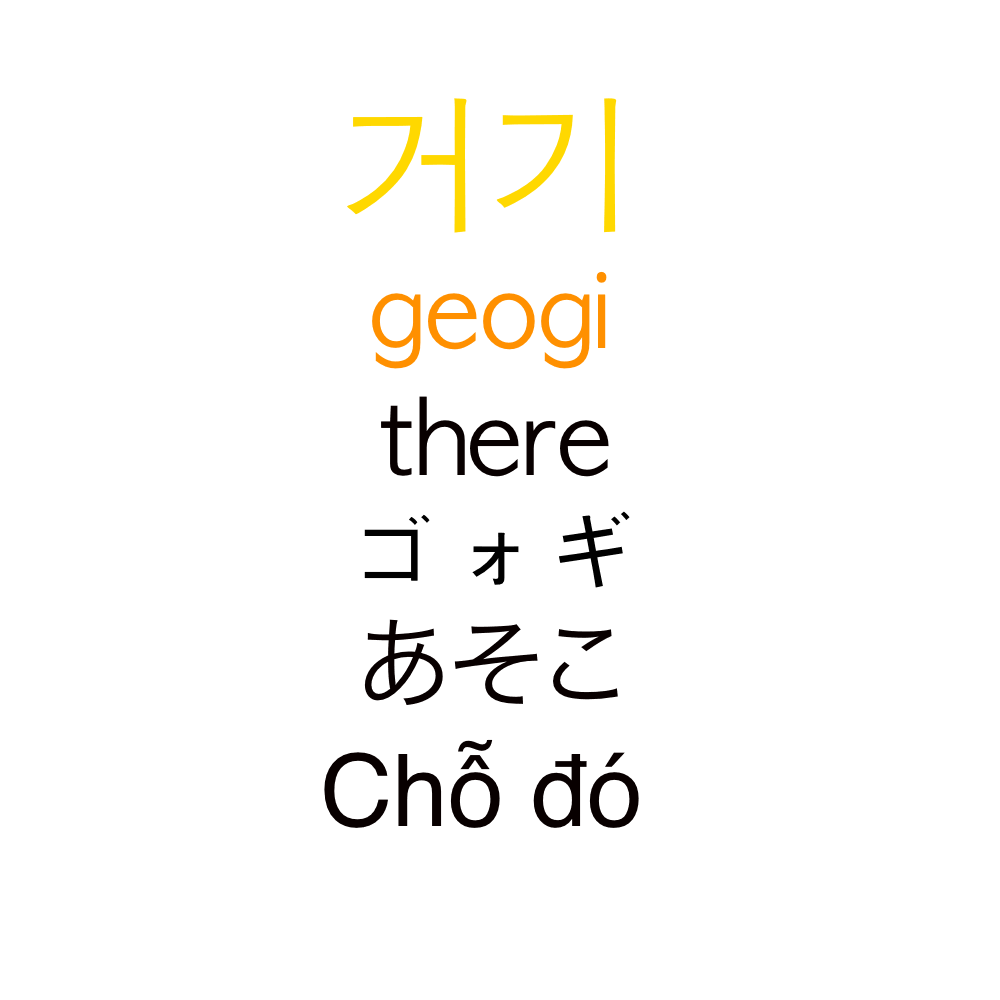
<style>
.page{position:relative;width:1000px;height:1000px;background:#ffffff}
.page>*{position:absolute;margin:0}
.t1{font:150px "AppleGothic";color:#ffd800}
.t2{font:100px "AppleGothic";color:#ff9000}
.t3{font:100px "AppleGothic";color:#080000}
.t4{font:100px "AppleGothic";color:#000000}
.t5{font:100px "HiraKakuProN-W3";color:#080000}
.t6{font:100px "Helvetica";color:#080000}
</style>
<div class="page">
<p class="t1" style="left:347px;top:98px;width:270px;height:135px">거기</p>
<p class="t2" style="left:372px;top:271px;width:235px;height:98px">geogi</p>
<p class="t3" style="left:381px;top:396px;width:228px;height:81px">there</p>
<p class="t4" style="left:364px;top:511px;width:266px;height:77px">ゴォギ</p>
<p class="t5" style="left:364px;top:619px;width:254px;height:86px">あそこ</p>
<p class="t6" style="left:324px;top:739px;width:315px;height:89px">Chỗ đó</p>
</div>
